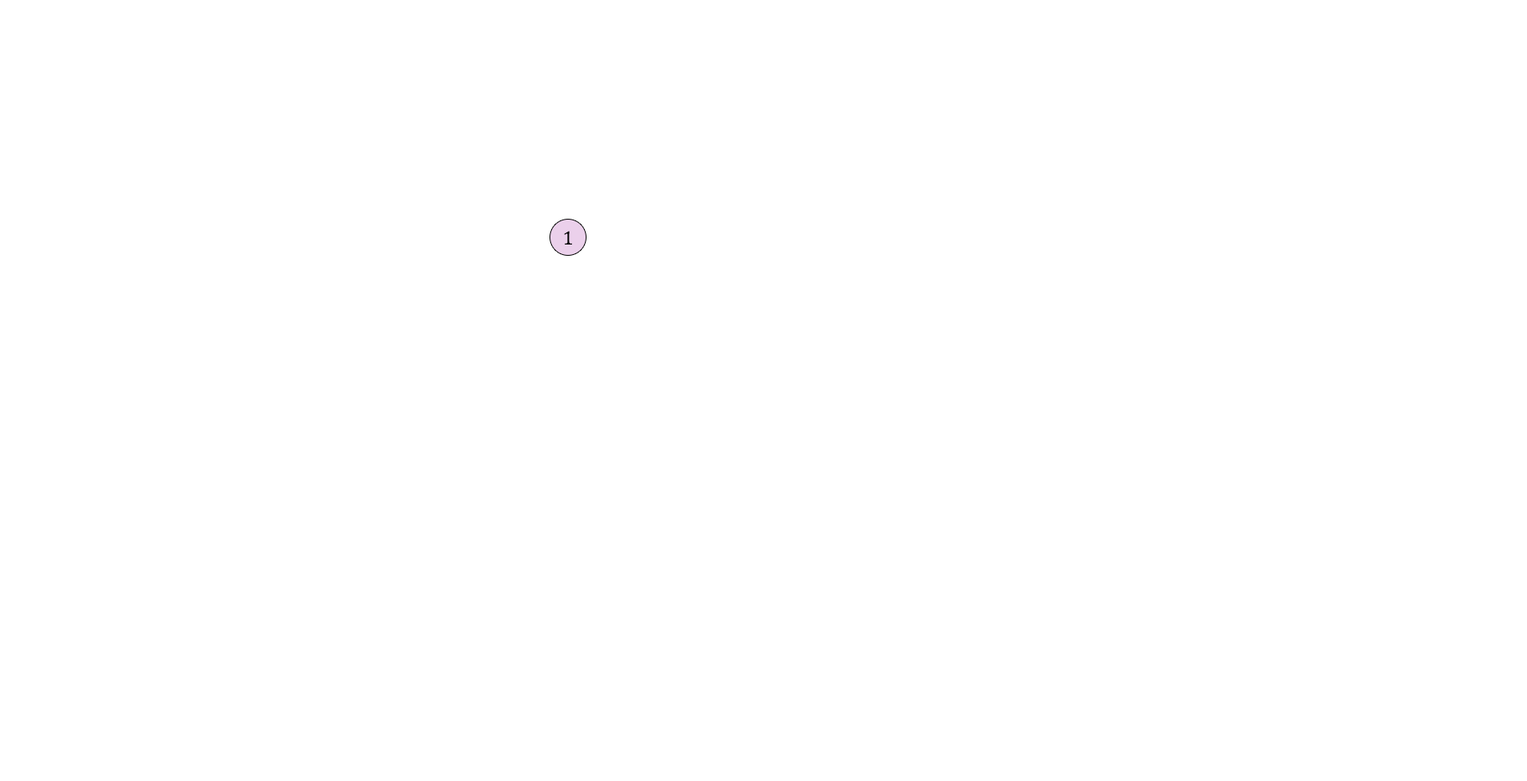
<style>
.page{position:relative;width:1527px;height:781px;background:#ffffff}
.page>*{position:absolute;margin:0}
.t1{font:19.3px "Cambria";color:#000000}
</style>
<div class="page">
<p class="t1" style="left:564px;top:231px;width:8px;height:14px">1</p>
</div>
